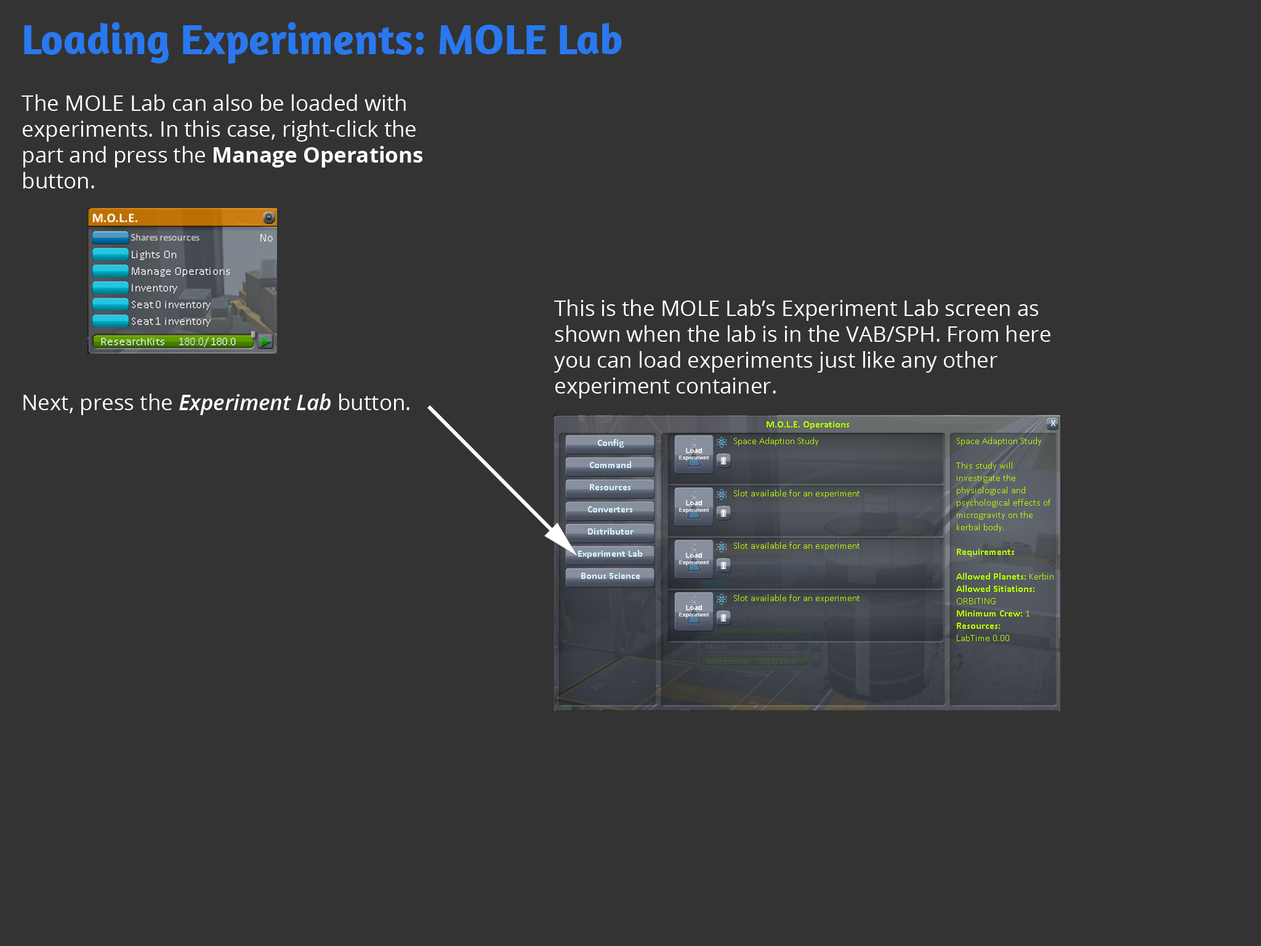
<style>
.page{position:relative;width:1261px;height:946px;background:#333333}
.page>*{position:absolute;margin:0}
.t1{font:43.1px "Amaranth-Bold";color:#2978ef}
.t2{font:21.5px "OpenSans";color:#ffffff}
.t3{font:21.5px "OpenSans-Bold";color:#ffffff}
.t4{font:21.5px "OpenSans-SemiboldItalic";color:#ffffff}
</style>
<div class="page">
<p class="t1" style="left:24px;top:22px;width:598px;height:42px">Loading Experiments: MOLE Lab</p>
<p class="t2" style="left:22px;top:94px;width:400px;height:94px">The MOLE Lab can also be loaded with experiments. In this case, right-click the part and press the <span class="t3">Manage Operations </span>button.</p>
<p class="t2" style="left:554px;top:299px;width:496px;height:99px">This is the MOLE Lab’s Experiment Lab screen as shown when the lab is in the VAB/SPH. From here you can load experiments just like any other experiment container.</p>
<p class="t2" style="left:23px;top:393px;width:386px;height:22px">Next, press the <span class="t4">Experiment Lab </span>button.</p>
</div>
